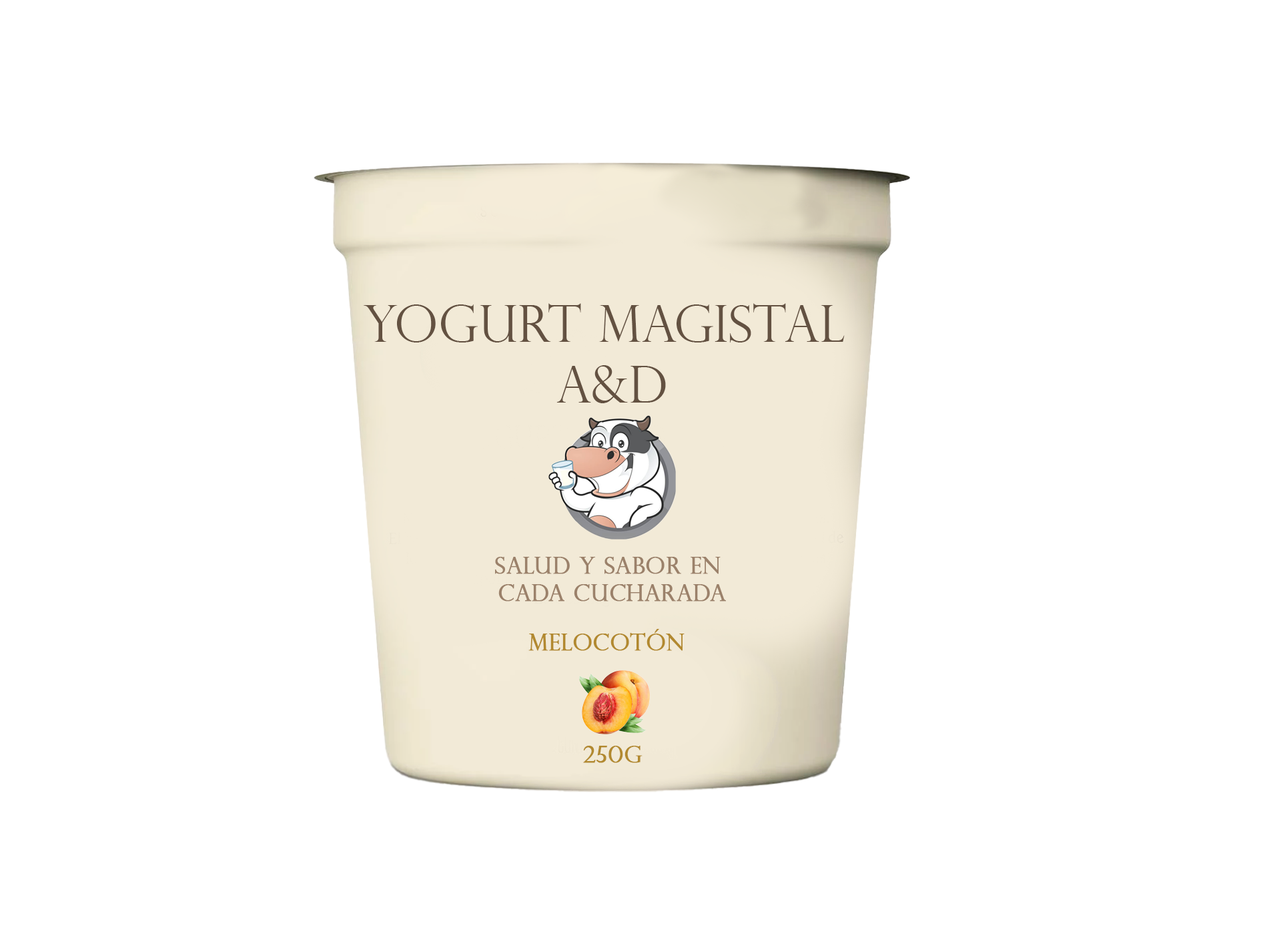
<style>
.page{position:relative;width:1261px;height:946px;background:#ffffff}
.page>*{position:absolute;margin:0}
.t1{font:50.8px "PerpetuaTitlingMT-Light";color:#635141}
.t2{font:22.9px "PerpetuaTitlingMT-Light";color:#9b816a;font-weight:bold}
.t3{font:22.9px "PerpetuaTitlingMT-Light";color:#b2892f;font-weight:bold}
</style>
<div class="page">
<p class="t1" style="left:363px;top:303px;width:482px;height:100px;text-align:center">Yogurt Magistal <br>A&amp;D</p>
<p class="t2" style="left:495px;top:557px;width:231px;height:44px;text-align:center">salud y sabor en <br>cada cucharada</p>
<p class="t3" style="left:528px;top:629px;width:157px;height:22px">Melocotón</p>
<p class="t3" style="left:583px;top:745px;width:60px;height:18px">250g</p>
</div>
